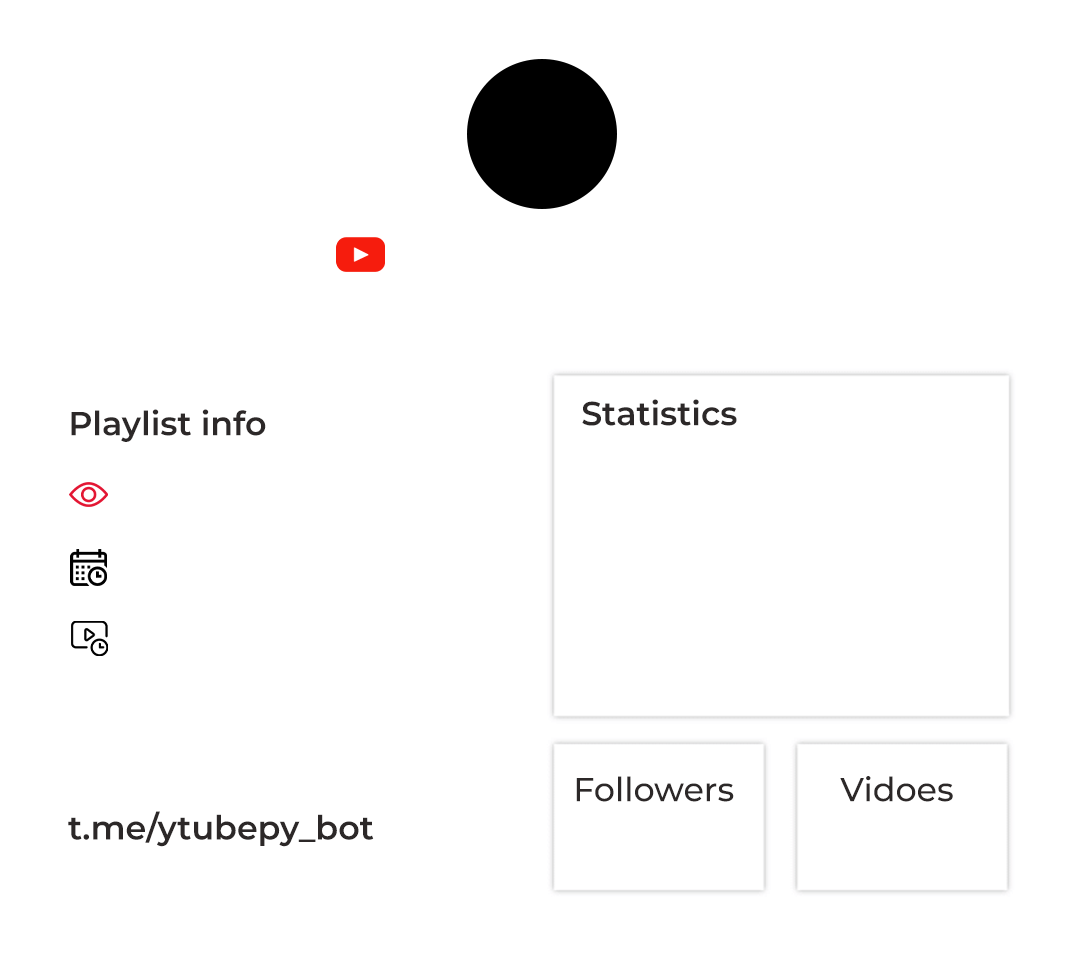
<style>
.page{position:relative;width:1084px;height:958px;background:#ffffff}
.page>*{position:absolute;margin:0}
.t1{font:33.3px "Montserrat-SemiBold";color:#2c2828}
.t2{font:33.3px "Montserrat-Medium";color:#2c2828}
</style>
<div class="page">
<p class="t1" style="left:582px;top:399px;width:155px;height:27px">Statistics</p>
<p class="t1" style="left:71px;top:409px;width:195px;height:33px">Playlist info</p>
<p class="t2" style="left:576px;top:776px;width:158px;height:26px">Followers</p>
<p class="t2" style="left:840px;top:776px;width:113px;height:26px">Vidoes</p>
<p class="t1" style="left:68px;top:811px;width:306px;height:36px">t.me/ytubepy_bot</p>
</div>
